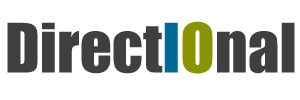
<style>
.page{position:relative;width:300px;height:100px;background:#ffffff}
.page>*{position:absolute;margin:0}
.t1{font:63px "Impact";color:#3f3f3f}
.t2{font:63px "Impact";color:#006995}
.t3{font:63px "Impact";color:#899500}
</style>
<div class="page">
<p class="t1" style="left:7px;top:21px;width:288px;height:53px">Direct<span class="t2">I</span><span class="t3">O</span>nal</p>
</div>
